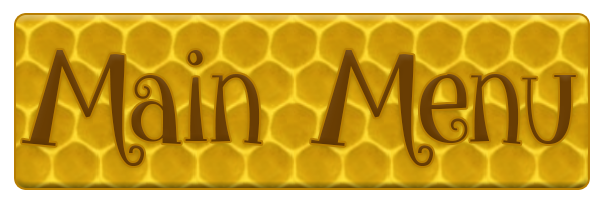
<style>
.page{position:relative;width:600px;height:200px}
.page>*{position:absolute;margin:0}
.t1{font:129.3px "give_me_some_sugar";color:#693d03}
</style>
<div class="page">
<p class="t1" style="left:22px;top:50px;width:554px;height:116px">Main Menu</p>
</div>
